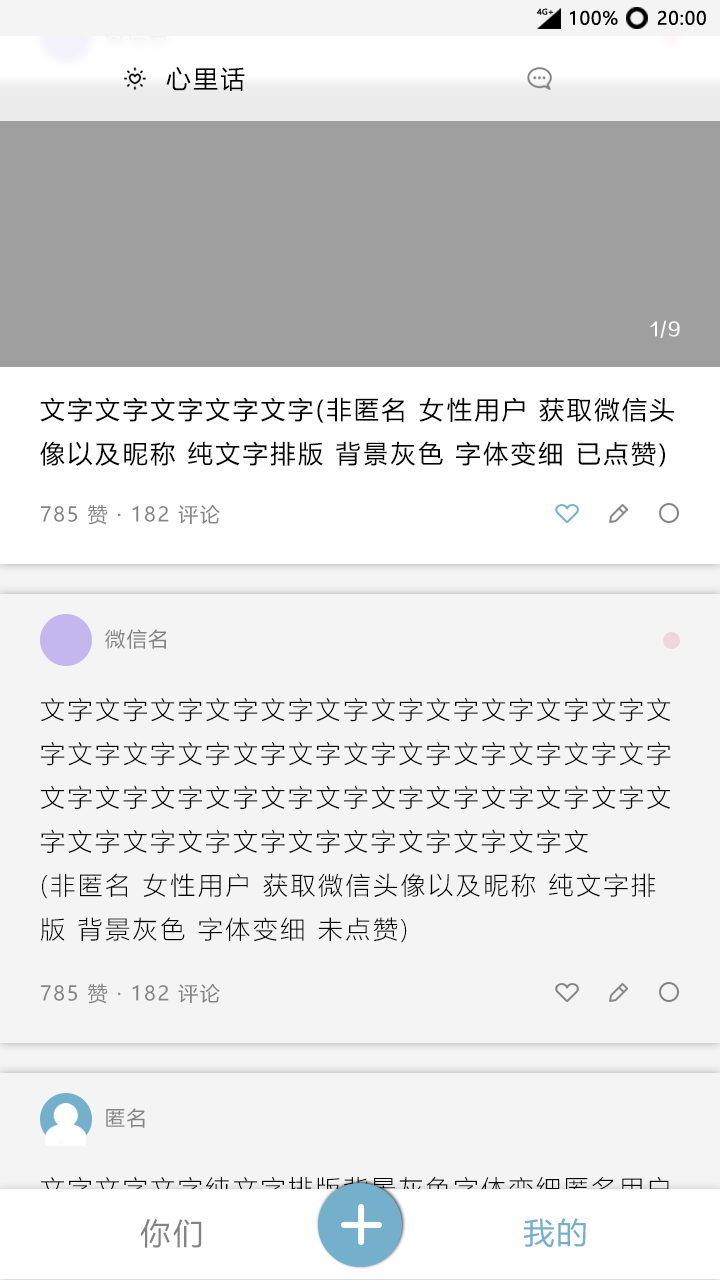
<style>
.page{position:relative;width:720px;height:1280px;background:#f4f4f4}
.page>*{position:absolute;margin:0}
.t1{font:7.8px "MicrosoftYaHei";letter-spacing:0.01em;color:#0e0e0e;scale:1.03 1}
.t2{font:18px "MicrosoftYaHei";letter-spacing:0.05em;color:#000000}
.t3{font:25px "MicrosoftYaHei";letter-spacing:0.1em;color:#000000}
.t4{font:17.8px "FZZZHUNHJW--GB1-0";letter-spacing:0.1em;color:#ffffff}
.t5{font:25.1px "MicrosoftYaHei";letter-spacing:0.1em;color:#000000}
.t6{font:20px "MicrosoftYaHei";letter-spacing:0.08em;color:#848484}
.t7{font:25.1px "MicrosoftYaHeiLight";letter-spacing:0.1em;color:#000000}
.t8{font:25.1px "MicrosoftYaHeiLight";letter-spacing:0.1em}
.t9{font:30px "MicrosoftYaHei";letter-spacing:0.1em;color:#848484}
.t10{font:30px "MicrosoftYaHei";letter-spacing:0.08em;color:#74b0cc;scale:1.03 1}
</style>
<div class="page">
<p class="t1" style="left:537px;top:8px;width:16px;height:7px">4G+</p>
<p class="t2" style="left:570px;top:10px;width:48px;height:15px">100%</p>
<p class="t2" style="left:657px;top:10px;width:49px;height:15px">20:00</p>
<p class="t3" style="left:166px;top:66px;width:79px;height:25px">心里话</p>
<p class="t4" style="left:650px;top:320px;width:30px;height:18px">1/9</p>
<p class="t5" style="left:40px;top:397px;width:634px;height:70px">文字文字文字文字文字(非匿名 女性用户 获取微信头<br>像以及昵称 纯文字排版 背景灰色 字体变细 已点赞)</p>
<p class="t6" style="left:41px;top:504px;width:179px;height:21px">785 赞 · 182 评论</p>
<p class="t6" style="left:105px;top:629px;width:61px;height:20px">微信名</p>
<p class="t7" style="left:40px;top:697px;width:631px;height:246px">文字文字文字文字文字文字文字文字文字文字文字文<br>字文字文字文字文字文字文字文字文字文字文字文字<br>文字文字文字文字文字文字文字文字文字文字文字文<br>字文字文字文字文字文字文字文字文字文字文<br>(非匿名 女性用户 获取微信头像以及昵称 纯文字排<br>版 背景灰色 字体变细 未点赞)</p>
<p class="t6" style="left:41px;top:983px;width:179px;height:21px">785 赞 · 182 评论</p>
<p class="t6" style="left:106px;top:1108px;width:39px;height:20px">匿名</p>
<p class="t8" style="left:41px;top:1176px;width:628px;height:25px">文字文字文字纯文字排版背景灰色字体变细匿名用户</p>
<p class="t9" style="left:140px;top:1219px;width:62px;height:29px">你们</p>
<p class="t10" style="left:523px;top:1218px;width:63px;height:30px">我的</p>
</div>
